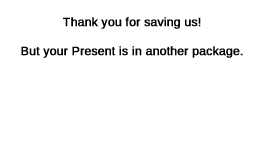
<style>
.page{position:relative;width:270px;height:162px;background:#ffffff}
.page>*{position:absolute;margin:0}
.t1{font:12px "Arimo";color:#000000;font-weight:bold}
</style>
<div class="page">
<p class="t1" style="left:21px;top:17px;width:222px;height:41px;text-align:center">Thank you for saving us!<br><br>But your Present is in another package.</p>
</div>
